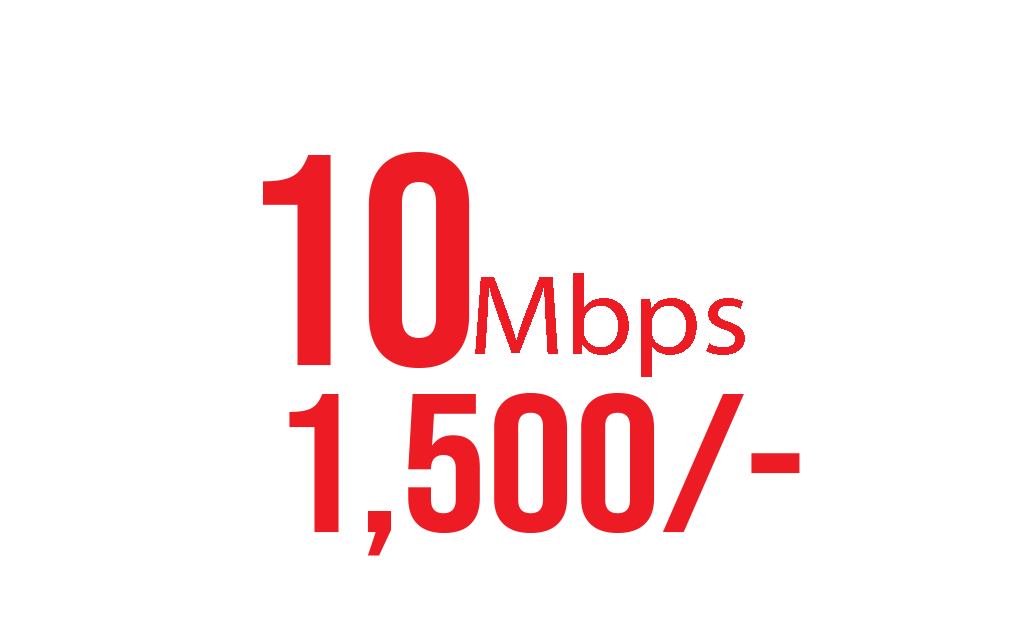
<style>
.page{position:relative;width:1017px;height:634px;background:#ffffff}
.page>*{position:absolute;margin:0}
.t1{font:300px "BebasNeue-Regular";color:#ed1c24}
.t2{font:196.7px "BebasNeue-Regular";color:#ed1c24;scale:1.11 1}
</style>
<div class="page">
<p class="t1" style="left:263px;top:152px;width:207px;height:216px">10</p>
<p class="t2" style="left:289px;top:393px;width:511px;height:163px">1,500/-</p>
</div>
